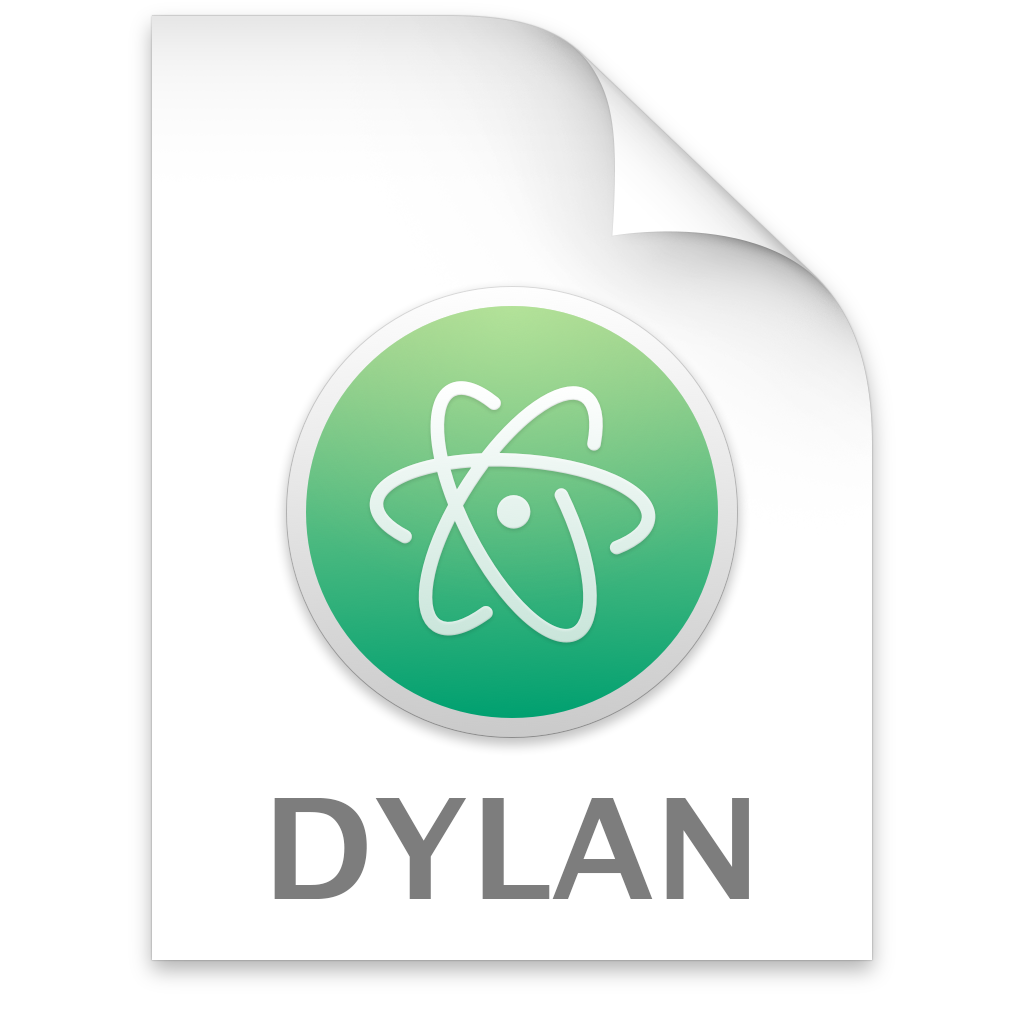
<style>
.page{position:relative;width:1024px;height:1024px;background:#ffffff}
.page>*{position:absolute;margin:0}
.t1{font:140px "LucidaGrande-Bold";color:#7d7d7d}
</style>
<div class="page">
<p class="t1" style="left:274px;top:798px;width:475px;height:101px">DYLAN</p>
</div>
